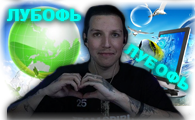
<style>
.page{position:relative;width:195px;height:120px}
.page>*{position:absolute;margin:0}
.t1{font:15.5px "Arial-Black";color:#00fff0}
</style>
<div class="page">
<p class="t1" style="left:7px;top:9px;width:74px;height:12px">ЛУБОФЬ</p>
<p class="t1" style="left:123px;top:43px;width:65px;height:47px;rotate:33deg">ЛУБОФЬ</p>
</div>
